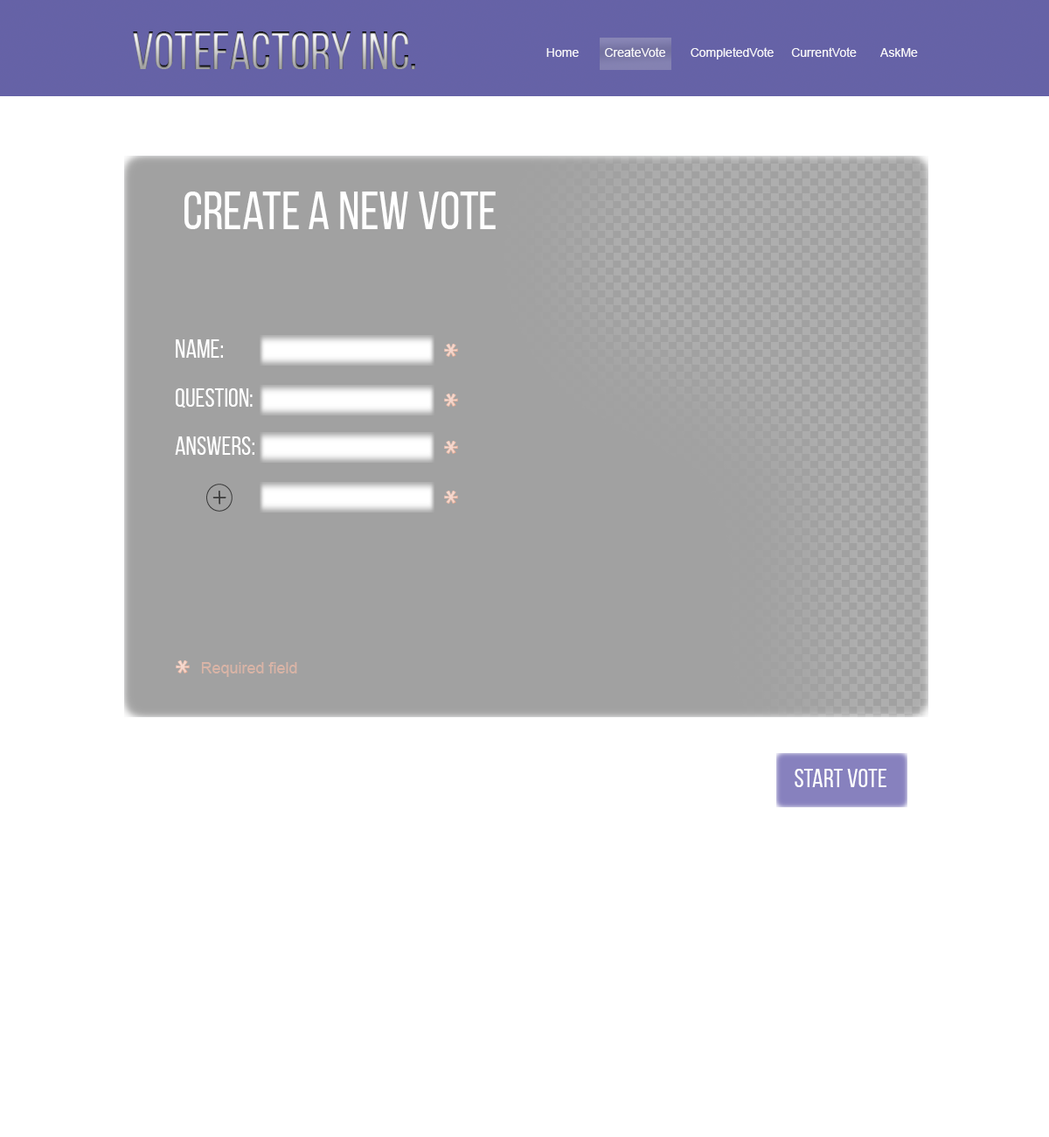
<style>
.page{position:relative;width:1049px;height:1137px;background:#ffffff}
.page>*{position:absolute;margin:0}
.t1{font:52.5px "BebasNeueRegular"}
.t2{font:12.2px "ArialMT";color:#f8f7fa}
.t3{font:52.5px "BebasNeueRegular";color:#ffffff}
.t4{font:26.2px "BebasNeueRegular";color:#ffffff}
.t5{font:15.7px "ArialMT";color:#d9b4a6}
</style>
<div class="page">
<p class="t1" style="left:133px;top:31px;width:282px;height:38px">Votefactory inc.</p>
<p class="t2" style="left:546px;top:48px;width:33px;height:9px">Home</p>
<p class="t2" style="left:605px;top:47px;width:60px;height:10px">CreateVote</p>
<p class="t2" style="left:691px;top:47px;width:83px;height:12px">CompletedVote</p>
<p class="t2" style="left:791px;top:47px;width:66px;height:10px">CurrentVote</p>
<p class="t2" style="left:880px;top:48px;width:38px;height:9px">AskMe</p>
<p class="t3" style="left:184px;top:191px;width:312px;height:38px">Create a new Vote</p>
<p class="t4" style="left:176px;top:339px;width:47px;height:19px">name:</p>
<p class="t4" style="left:176px;top:388px;width:77px;height:19px">Question:</p>
<p class="t4" style="left:175px;top:436px;width:79px;height:19px">answers:</p>
<p class="t5" style="left:201px;top:662px;width:96px;height:15px">Required field</p>
<p class="t4" style="left:795px;top:768px;width:92px;height:19px">Start vote</p>
</div>
